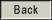
<style>
.page{position:relative;width:52px;height:20px;background:#d0cfc0}
.page>*{position:absolute;margin:0}
.t1{font:12px "ArialNarrow";letter-spacing:0.075em;color:#000000}
</style>
<div class="page">
<p class="t1" style="left:14px;top:5px;width:24px;height:9px">Back</p>
</div>
